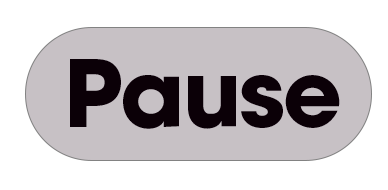
<style>
.page{position:relative;width:388px;height:190px;background:#c7c1c5}
.page>*{position:absolute;margin:0}
.t1{font:91.7px "ITCAvantGardePro-Bold";letter-spacing:-0.02em;color:#000000}
</style>
<div class="page">
<p class="t1" style="left:70px;top:59px;width:270px;height:70px">Pause</p>
</div>
